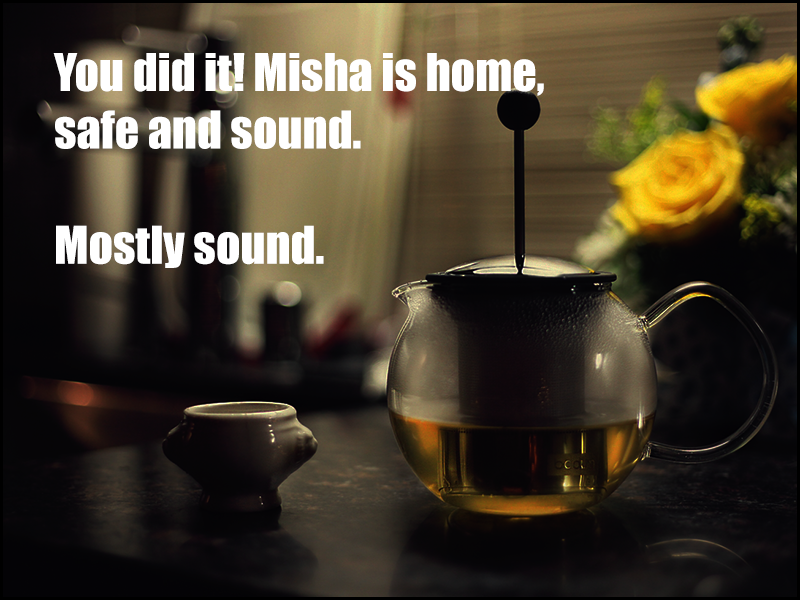
<style>
.page{position:relative;width:800px;height:600px}
.page>*{position:absolute;margin:0}
.t1{font:48px "Impact";color:#ffffff}
</style>
<div class="page">
<p class="t1" style="left:53px;top:53px;width:491px;height:215px">You did it! Misha is home,<br>safe and sound.<br><br>Mostly sound.</p>
</div>
